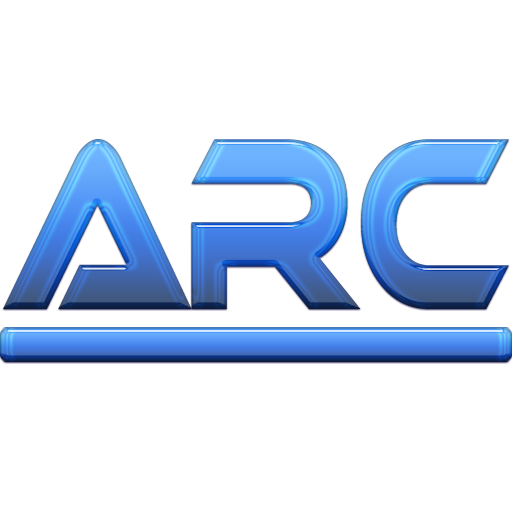
<style>
.page{position:relative;width:512px;height:512px;background:#ffffff}
.page>*{position:absolute;margin:0}
.t1{font:235px "Ethnocentric";letter-spacing:-0.025em;scale:0.67 1}
</style>
<div class="page">
<p class="t1" style="left:3px;top:139px;width:506px;height:170px">ARC</p>
</div>
